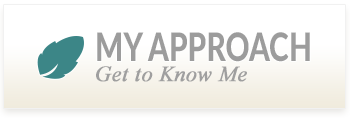
<style>
.page{position:relative;width:350px;height:122px;background:#ffffff}
.page>*{position:absolute;margin:0}
.t1{font:39px "Lato-Heavy";color:#9c9c9c;scale:0.77 1}
.t2{font:22px "TimesNewRomanPS-ItalicMT";color:#9f9f9f;font-weight:bold}
</style>
<div class="page">
<p class="t1" style="left:97px;top:32px;width:213px;height:30px">MY APPROACH</p>
<p class="t2" style="left:96px;top:66px;width:151px;height:16px">Get to Know Me</p>
</div>
